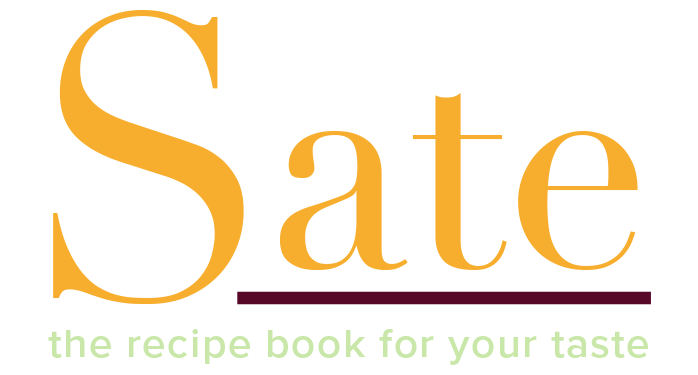
<style>
.page{position:relative;width:698px;height:375px;background:#ffffff}
.page>*{position:absolute;margin:0}
.t1{font:306.2px "Didot";color:#f7ae2e;scale:0.95 1}
.t2{font:393.8px "Didot";letter-spacing:-0.02em;color:#f7ae2e;scale:0.95 1}
.t3{font:40.4px "ProximaNova-Semibold";letter-spacing:0.034em;color:#c8e7a8;scale:1.05 1}
</style>
<div class="page">
<p class="t1" style="left:53px;top:10px;width:585px;height:294px"><span class="t2">S</span>ate</p>
<p class="t3" style="left:48px;top:329px;width:600px;height:36px">the recipe book for your taste</p>
</div>
